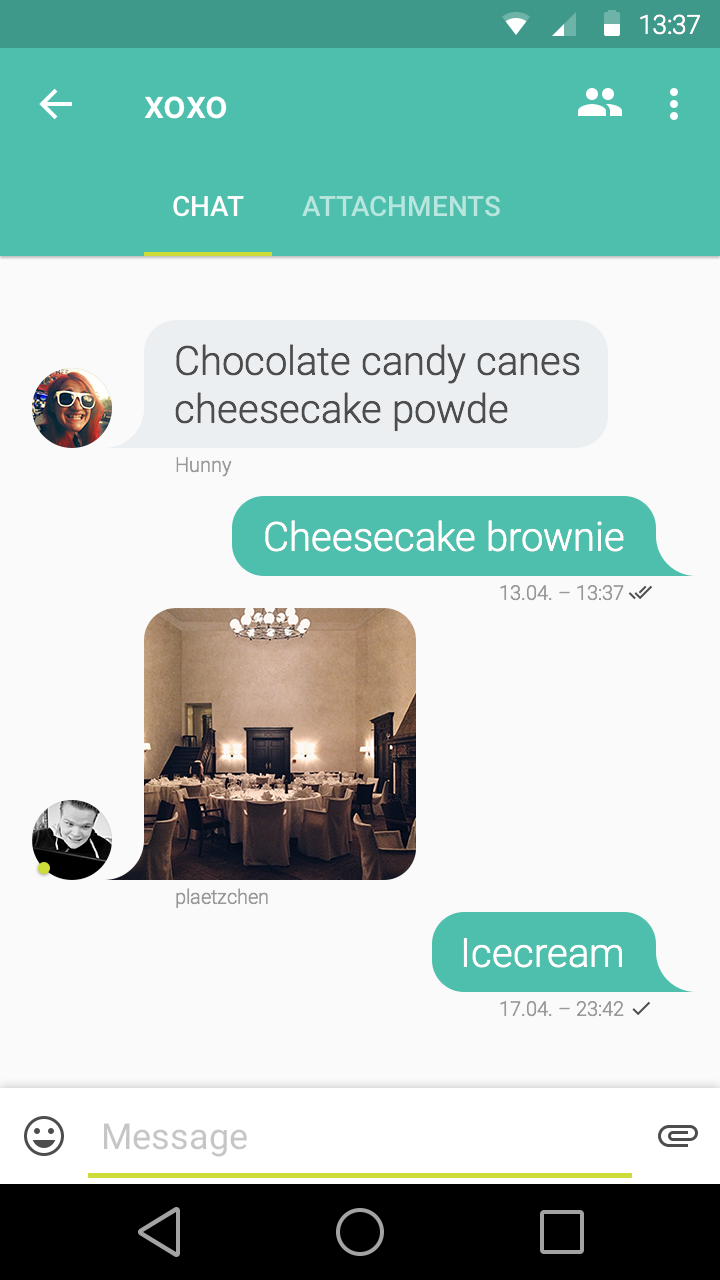
<style>
.page{position:relative;width:720px;height:1280px;background:#fafafa}
.page>*{position:absolute;margin:0}
.t1{font:26.1px "Roboto-Light";color:#ffffff}
.t2{font:40px "Roboto-Medium";color:#ffffff}
.t3{font:28px "Roboto-Medium";color:#ffffff;text-transform:uppercase}
.t4{font:28px "Roboto-Medium";color:#b8e5de;text-transform:uppercase}
.t5{font:40px/48px "Roboto-Light";color:#4d4d4d}
.t6{font:20px "Roboto-Light";color:#999999}
.t7{font:40px "Roboto-Light";color:#ffffff}
.t8{font:36px "Roboto-Regular";color:#c6c6c6}
</style>
<div class="page">
<p class="t1" style="left:640px;top:14px;width:60px;height:21px">13:37</p>
<p class="t2" style="left:144px;top:96px;width:83px;height:23px">xoxo</p>
<p class="t3" style="left:173px;top:195px;width:71px;height:22px">Chat</p>
<p class="t4" style="left:302px;top:195px;width:198px;height:22px">Attachments</p>
<p class="t5" style="left:175px;top:344px;width:405px;height:88px">Chocolate candy canes<br>cheesecake powde</p>
<p class="t6" style="left:176px;top:457px;width:56px;height:20px">Hunny</p>
<p class="t7" style="left:265px;top:520px;width:359px;height:32px">Cheesecake brownie</p>
<p class="t6" style="left:500px;top:585px;width:124px;height:16px">13.04. – 13:37</p>
<p class="t6" style="left:176px;top:888px;width:92px;height:20px">plaetzchen</p>
<p class="t7" style="left:463px;top:938px;width:159px;height:30px">Icecream</p>
<p class="t6" style="left:500px;top:1001px;width:124px;height:16px">17.04. – 23:42</p>
<p class="t8" style="left:104px;top:1123px;width:143px;height:34px">Message</p>
</div>
